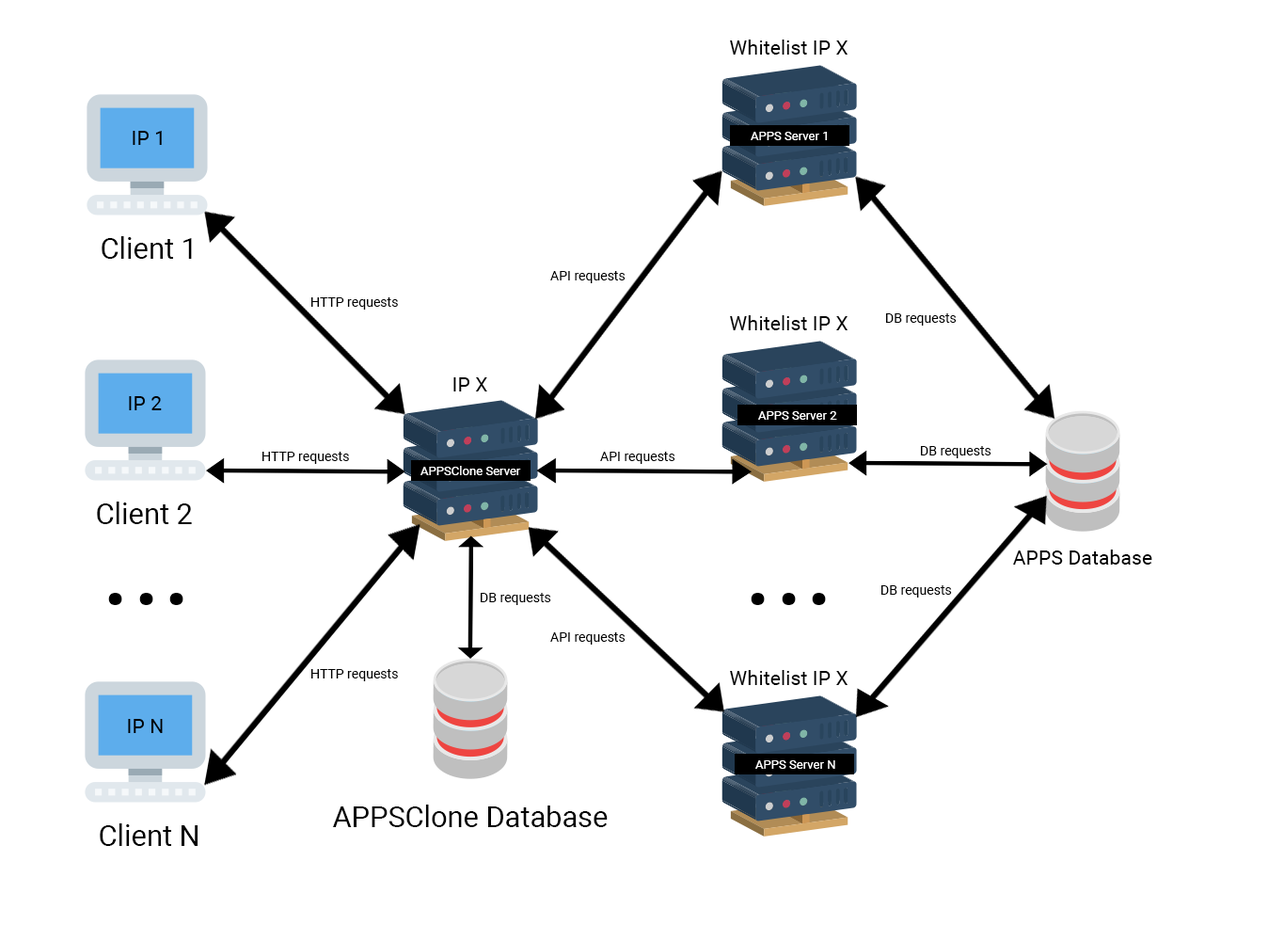
<style>
.page{position:relative;width:1268px;height:941px;background:#ffffff}
.page>*{position:absolute;margin:0}
.t1{font:20.2px "Roboto-Regular";color:#000000}
.t2{font:12.3px "Roboto-Regular";color:#ffffff}
.t3{font:28.9px "Roboto-Regular";color:#000000}
.t4{font:13.2px "Roboto-Regular";color:#000000}
.t5{font:20px "Roboto-Regular";color:#000000}
.t6{font:115.9px "Roboto-Regular";color:#000000}
</style>
<div class="page">
<p class="t1" style="left:730px;top:40px;width:118px;height:15px">Whitelist IP X</p>
<p class="t1" style="left:133px;top:131px;width:29px;height:14px">IP 1</p>
<p class="t2" style="left:751px;top:132px;width:76px;height:8px">APPS Server 1</p>
<p class="t3" style="left:102px;top:236px;width:90px;height:23px">Client 1</p>
<p class="t4" style="left:550px;top:271px;width:75px;height:12px">API requests</p>
<p class="t4" style="left:311px;top:297px;width:87px;height:12px">HTTP requests</p>
<p class="t1" style="left:730px;top:315px;width:118px;height:15px">Whitelist IP X</p>
<p class="t4" style="left:886px;top:313px;width:71px;height:12px">DB requests</p>
<p class="t1" style="left:453px;top:377px;width:34px;height:14px">IP X</p>
<p class="t1" style="left:129px;top:396px;width:33px;height:14px">IP 2</p>
<p class="t2" style="left:758px;top:411px;width:79px;height:8px">APPS Server 2</p>
<p class="t4" style="left:921px;top:446px;width:70px;height:12px">DB requests</p>
<p class="t4" style="left:262px;top:451px;width:87px;height:13px">HTTP requests</p>
<p class="t4" style="left:600px;top:451px;width:75px;height:13px">API requests</p>
<p class="t2" style="left:420px;top:466px;width:101px;height:9px">APPSClone Server</p>
<p class="t3" style="left:97px;top:501px;width:95px;height:23px">Client 2</p>
<p class="t5" style="left:1013px;top:549px;width:139px;height:15px">APPS Database</p>
<p class="t6" style="left:108px;top:593px;width:75px;height:12px">...</p>
<p class="t4" style="left:481px;top:593px;width:70px;height:12px">DB requests</p>
<p class="t6" style="left:751px;top:593px;width:75px;height:12px">...</p>
<p class="t4" style="left:881px;top:585px;width:71px;height:12px">DB requests</p>
<p class="t4" style="left:550px;top:632px;width:75px;height:12px">API requests</p>
<p class="t4" style="left:311px;top:669px;width:87px;height:12px">HTTP requests</p>
<p class="t1" style="left:730px;top:670px;width:118px;height:15px">Whitelist IP X</p>
<p class="t1" style="left:128px;top:719px;width:35px;height:14px">IP N</p>
<p class="t2" style="left:755px;top:760px;width:80px;height:8px">APPS Server N</p>
<p class="t3" style="left:332px;top:804px;width:276px;height:23px">APPSClone Database</p>
<p class="t3" style="left:100px;top:823px;width:98px;height:23px">Client N</p>
</div>
